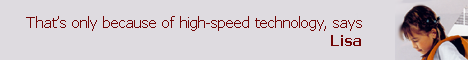
<style>
.page{position:relative;width:468px;height:60px;background:#dedbe0}
.page>*{position:absolute;margin:0}
.t1{font:14.6px "Tahoma";color:#700303}
.t2{font:14.6px "Tahoma-Bold";color:#700303}
</style>
<div class="page">
<p class="t1" style="left:26px;top:16px;width:336px;height:30px">That’s only because of high-speed technology, says <br>                                                             <span class="t2">Lisa</span></p>
</div>
